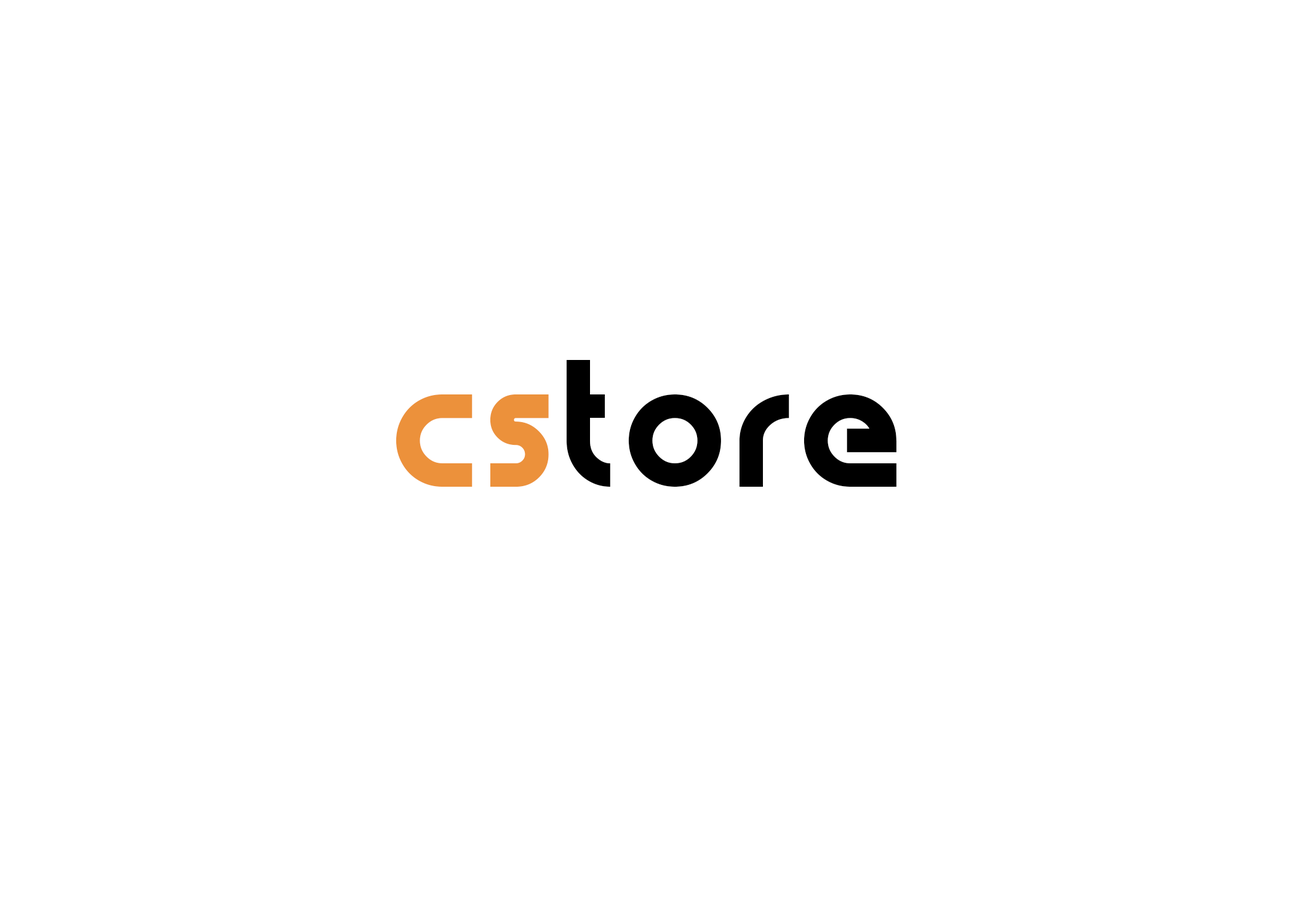
<style>
.page{position:relative;width:1292px;height:923px;background:#ffffff}
.page>*{position:absolute;margin:0}
.t1{font:184.6px "WerkHaus-Bold";color:#000000}
.t2{font:184.6px "WerkHaus-Bold";color:#ec913b}
</style>
<div class="page">
<p class="t1" style="left:396px;top:360px;width:500px;height:127px"><span class="t2">cs</span>tore</p>
</div>
